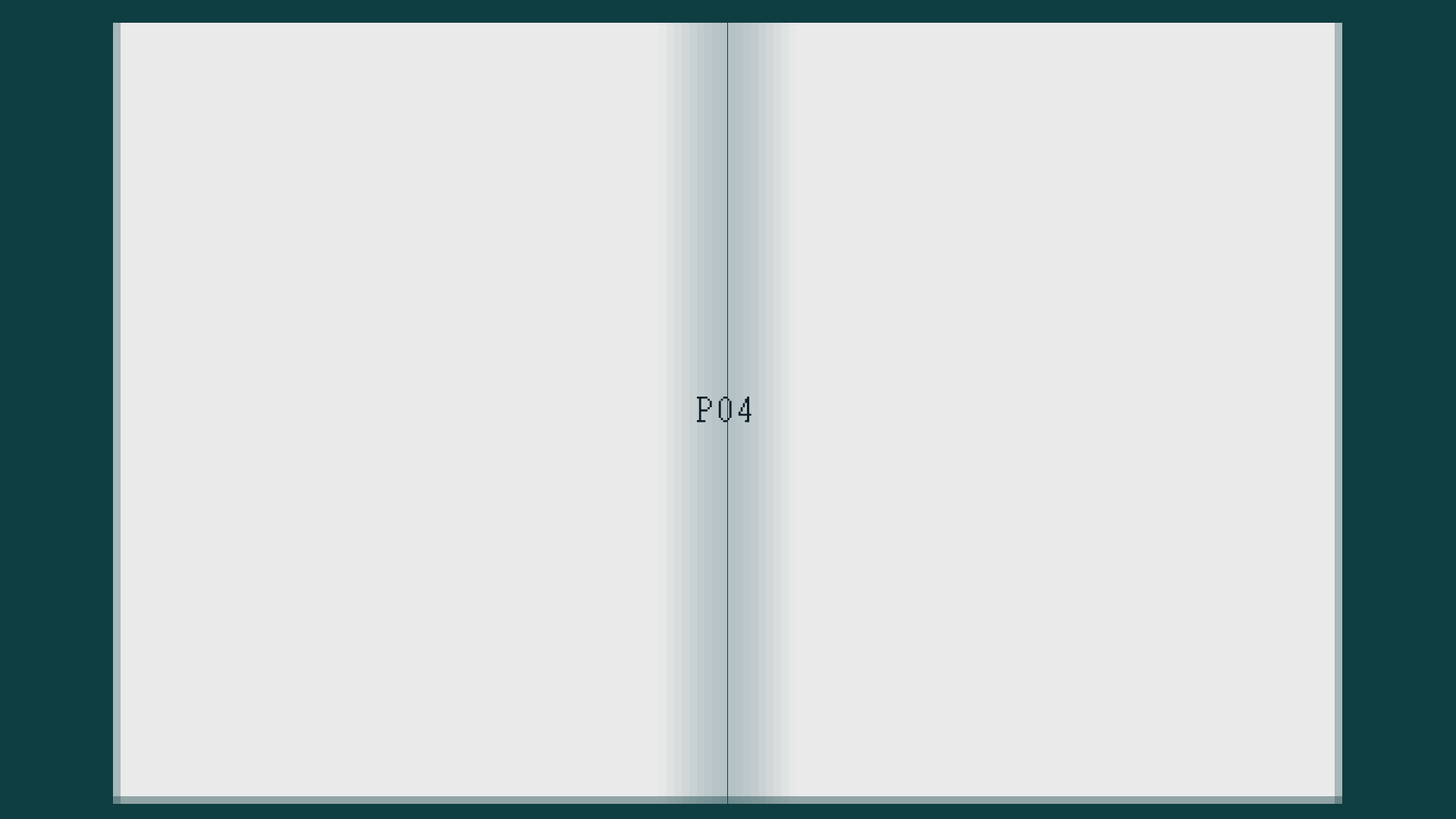
<style>
.page{position:relative;width:1456px;height:819px;background:#eaeaea}
.page>*{position:absolute;margin:0}
.t1{font:34.1px "KH-Dot-kagurazaka-16";letter-spacing:0.12em;color:#0a192d}
</style>
<div class="page">
<p class="t1" style="left:697px;top:397px;width:54px;height:25px">P04</p>
</div>
